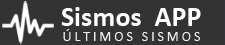
<style>
.page{position:relative;width:225px;height:45px;background:#333333}
.page>*{position:absolute;margin:0}
.t1{font:28.3px "Calibri-Bold";color:#ffffff}
.t2{font:14.1px "Calibri";letter-spacing:0.2em;color:#f0f0ec}
</style>
<div class="page">
<p class="t1" style="left:61px;top:7px;width:140px;height:19px">Sismos  APP</p>
<p class="t2" style="left:63px;top:29px;width:137px;height:12px">ÚLTIMOS SISMOS</p>
</div>
